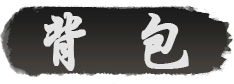
<style>
.page{position:relative;width:234px;height:84px;background:#ffffff}
.page>*{position:absolute;margin:0}
.t1{font:64px "STXingkai";color:#e4e4e4;font-weight:bold}
</style>
<div class="page">
<p class="t1" style="left:43px;top:12px;width:146px;height:59px">背  包</p>
</div>
